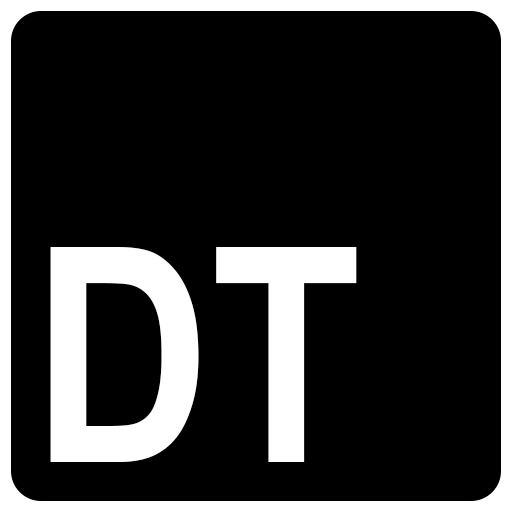
<style>
.page{position:relative;width:512px;height:512px;background:#000000}
.page>*{position:absolute;margin:0}
.t1{font:300px "ArialNarrow-Bold";color:#ffffff}
</style>
<div class="page">
<p class="t1" style="left:50px;top:247px;width:307px;height:215px">DT</p>
</div>
